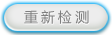
<style>
.page{position:relative;width:112px;height:35px}
.page>*{position:absolute;margin:0}
.t1{font:14px "MicrosoftYaHei";letter-spacing:0.2em;color:#7f7f7f}
</style>
<div class="page">
<p class="t1" style="left:24px;top:10px;width:65px;height:14px">重新检测</p>
</div>
